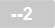
<style>
.page{position:relative;width:55px;height:28px;background:#c9c9c9}
.page>*{position:absolute;margin:0}
.t1{font:18.2px "Arial-BoldMT";color:#ffffff}
</style>
<div class="page">
<p class="t1" style="left:11px;top:7px;width:21px;height:13px">--2</p>
</div>
